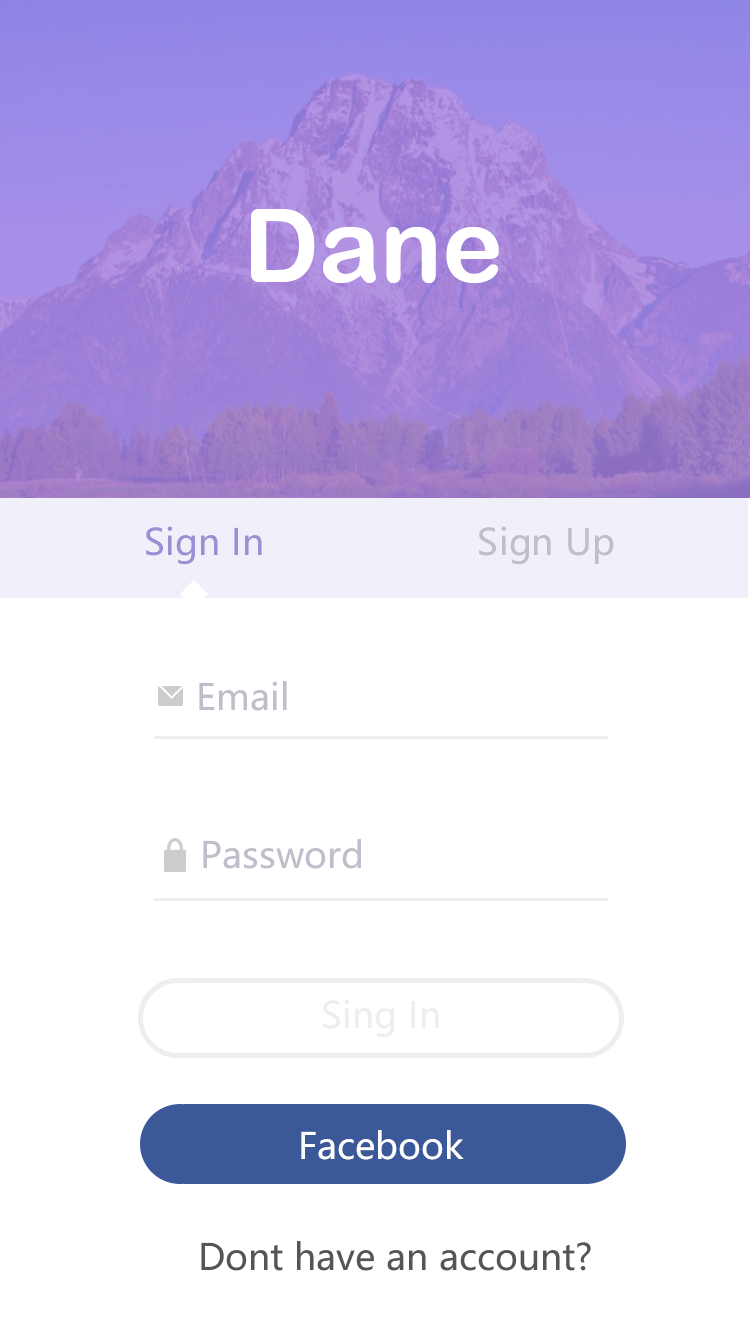
<style>
.page{position:relative;width:750px;height:1334px;background:#ffffff}
.page>*{position:absolute;margin:0}
.t1{font:103px "ArialRoundedMTBold";color:#ffffff}
.t2{font:36px "MicrosoftYaHei";color:#9c90d5}
.t3{font:36px "MicrosoftYaHei";color:#bfbfcb}
.t4{font:36px "MicrosoftYaHei";color:#eeeeee}
.t5{font:36px "MicrosoftYaHei";color:#ffffff}
.t6{font:36px "MicrosoftYaHei";color:#555555}
</style>
<div class="page">
<p class="t1" style="left:251px;top:209px;width:248px;height:74px">Dane</p>
<p class="t2" style="left:146px;top:526px;width:116px;height:39px">Sign In</p>
<p class="t3" style="left:479px;top:526px;width:135px;height:39px">Sign Up</p>
<p class="t3" style="left:199px;top:681px;width:88px;height:30px">Email</p>
<p class="t3" style="left:203px;top:839px;width:158px;height:30px">Password</p>
<p class="t4" style="left:323px;top:999px;width:116px;height:39px">Sing In</p>
<p class="t5" style="left:301px;top:1130px;width:163px;height:30px">Facebook</p>
<p class="t6" style="left:201px;top:1241px;width:390px;height:30px">Dont have an account?</p>
</div>
